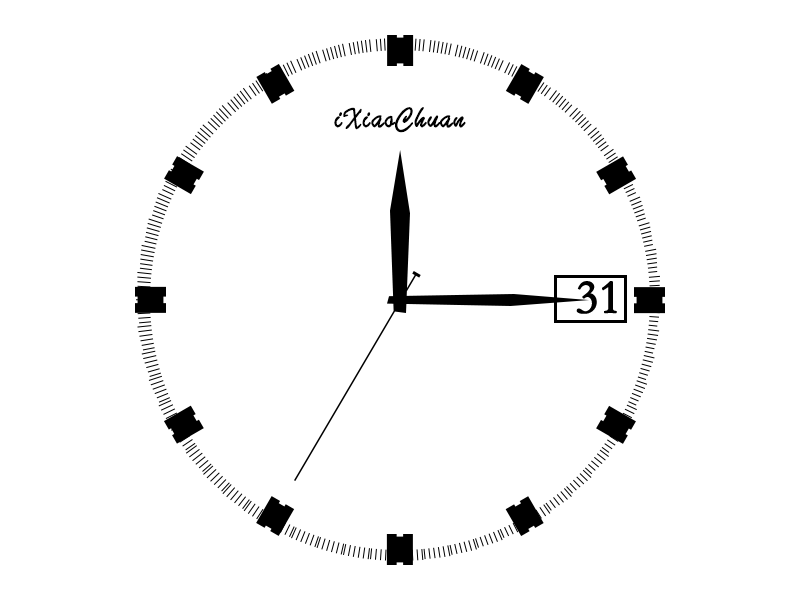
<style>
.page{position:relative;width:800px;height:600px;background:#ffffff}
.page>*{position:absolute;margin:0}
.t1{font:30px "STXingkaiSC-Light";color:#000000;font-weight:bold}
</style>
<div class="page">
<p class="t1" style="left:334px;top:107px;width:132px;height:26px">iXiaoChuan</p>
</div>
